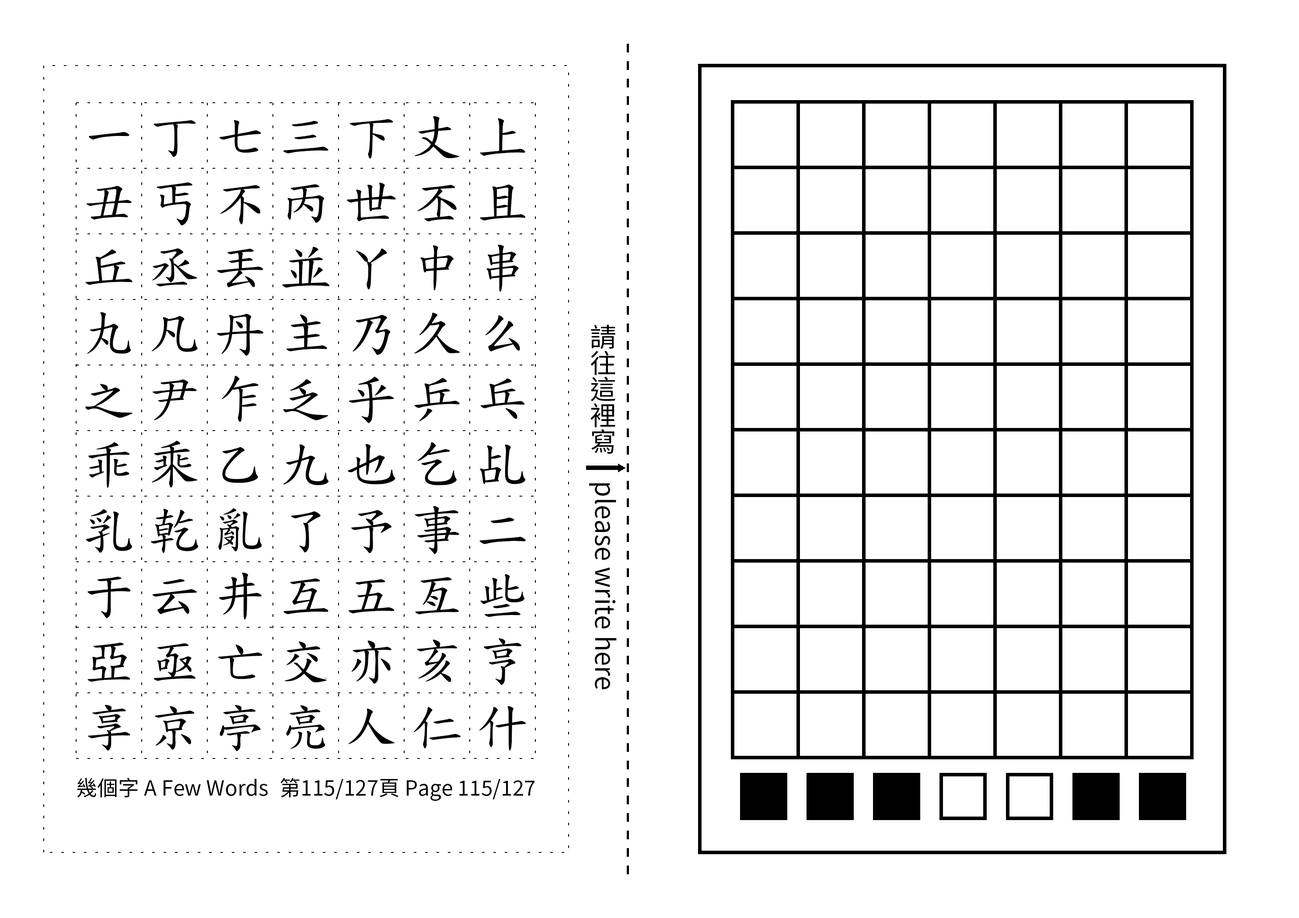
<style>
.page{position:relative;width:1299px;height:918px;background:#ffffff}
.page>*{position:absolute;margin:0}
.t1{font:52.5px/65.6px "TW-Kai-98_1";letter-spacing:0.25em;color:#000000}
.t2{font:26.2px "SourceHanSansTC-Regular";color:#000000}
.t3{font:21px "SourceHanSansTC-Regular";color:#000000}
</style>
<div class="page">
<p class="t1" style="left:85px;top:116px;width:441px;height:636px;text-align:center">一丁七三下丈上丑丐不丙世丕且丘丞丟並丫中串丸凡丹主乃久么之尹乍乏乎乒乓乖乘乙九也乞乩乳乾亂了予事二于云井互五亙些亞亟亡交亦亥亨享京亭亮人仁什</p>
<p class="t2" style="left:589px;top:324px;width:28px;height:366px;text-align:center">請往這裡寫　please write here</p>
<p class="t3" style="left:77px;top:778px;width:191px;height:20px">幾個字 A Few Words</p>
<p class="t3" style="left:280px;top:778px;width:255px;height:23px">第115/127頁 Page 115/127</p>
</div>
